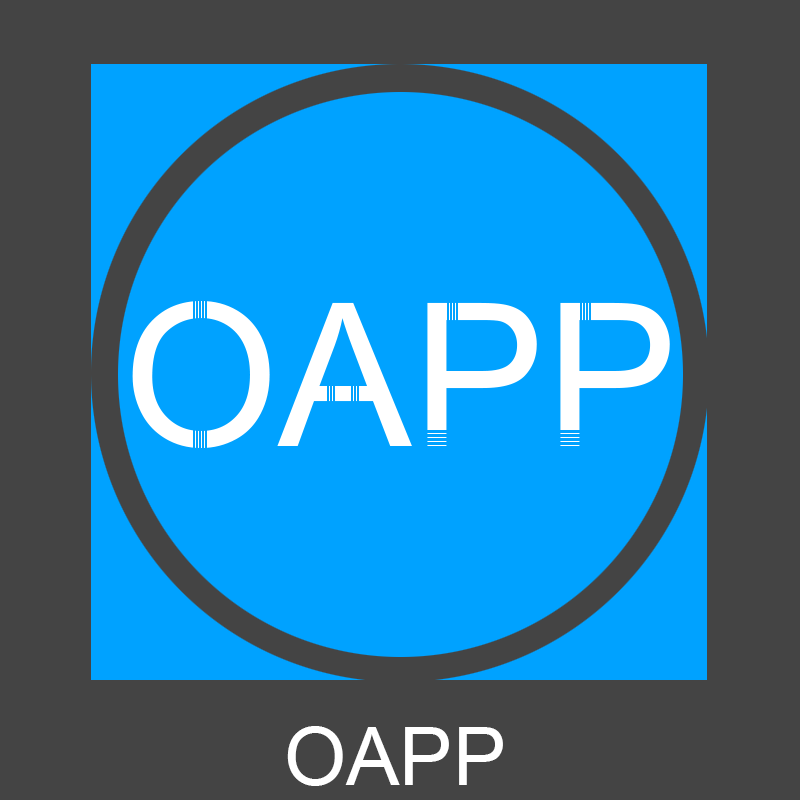
<style>
.page{position:relative;width:800px;height:800px;background:#00a2ff}
.page>*{position:absolute;margin:0}
.t1{font:80px "ArialMT";color:#ffffff}
</style>
<div class="page">
<p class="t1" style="left:287px;top:726px;width:216px;height:60px">OAPP</p>
</div>
